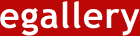
<style>
.page{position:relative;width:140px;height:36px;background:#bc0707}
.page>*{position:absolute;margin:0}
.t1{font:36px "TrebuchetMS-Bold";letter-spacing:0.025em;color:#ffffff}
</style>
<div class="page">
<p class="t1" style="left:0px;top:1px;width:140px;height:35px">egallery</p>
</div>
